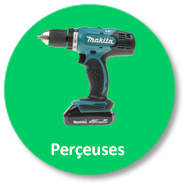
<style>
.page{position:relative;width:185px;height:185px;background:#00cc66}
.page>*{position:absolute;margin:0}
.t1{font:18px "Calibri-Bold";color:#ffffff}
</style>
<div class="page">
<p class="t1" style="left:51px;top:143px;width:74px;height:16px">Perçeuses</p>
</div>
